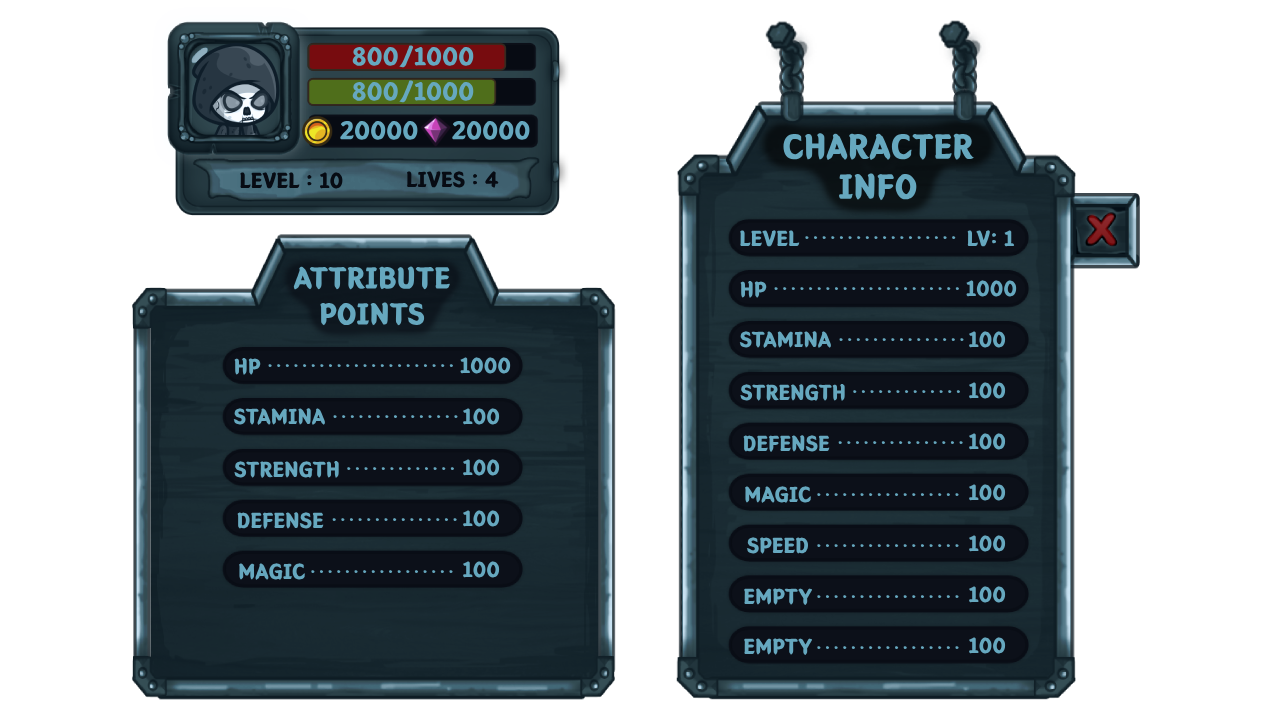
<style>
.page{position:relative;width:1280px;height:720px;background:#ffffff}
.page>*{position:absolute;margin:0}
.t1{font:25px "BMEULJIROTTF";color:#66a8bf;text-transform:uppercase;font-weight:bold}
.t2{font:33.9px "BMEULJIROTTF";color:#66a8bf;text-transform:uppercase;font-weight:bold}
.t3{font:21.2px "BMEULJIROTTF";color:#070b13;text-transform:uppercase;font-weight:bold}
.t4{font:21.2px "BMEULJIROTTF";color:#66a8bf;text-transform:uppercase;font-weight:bold}
.t5{font:17px "BMEULJIROTTF";letter-spacing:0.25em;color:#66a8bf;text-transform:uppercase;font-weight:bold}
.t6{font:29.5px "BMEULJIROTTF";color:#66a8bf;text-transform:uppercase;font-weight:bold}
</style>
<div class="page">
<p class="t1" style="left:352px;top:45px;width:122px;height:23px">800/1000</p>
<p class="t1" style="left:352px;top:80px;width:122px;height:23px">800/1000</p>
<p class="t1" style="left:340px;top:121px;width:78px;height:19px">20000</p>
<p class="t1" style="left:452px;top:121px;width:78px;height:19px">20000</p>
<p class="t2" style="left:783px;top:133px;width:191px;height:68px;text-align:center">character<br>Info</p>
<p class="t3" style="left:240px;top:172px;width:103px;height:17px">Level : 10</p>
<p class="t3" style="left:407px;top:171px;width:92px;height:17px">Lives : 4</p>
<p class="t4" style="left:740px;top:230px;width:60px;height:17px">Level</p>
<p class="t4" style="left:967px;top:230px;width:48px;height:17px">Lv: 1</p>
<p class="t5" style="left:805px;top:236px;width:151px;height:3px">..................</p>
<p class="t6" style="left:293px;top:266px;width:157px;height:60px;text-align:center">Attribute<br>Points</p>
<p class="t4" style="left:740px;top:281px;width:27px;height:17px">HP</p>
<p class="t4" style="left:966px;top:280px;width:51px;height:17px">1000</p>
<p class="t5" style="left:774px;top:287px;width:185px;height:3px">......................</p>
<p class="t4" style="left:739px;top:331px;width:92px;height:17px">Stamina</p>
<p class="t5" style="left:839px;top:338px;width:125px;height:3px">...............</p>
<p class="t4" style="left:969px;top:331px;width:37px;height:17px">100</p>
<p class="t4" style="left:234px;top:358px;width:27px;height:17px">HP</p>
<p class="t5" style="left:268px;top:364px;width:185px;height:3px">......................</p>
<p class="t4" style="left:460px;top:357px;width:51px;height:17px">1000</p>
<p class="t4" style="left:740px;top:384px;width:105px;height:17px">Strength</p>
<p class="t5" style="left:853px;top:390px;width:107px;height:3px">.............</p>
<p class="t4" style="left:969px;top:382px;width:37px;height:17px">100</p>
<p class="t4" style="left:233px;top:408px;width:92px;height:17px">Stamina</p>
<p class="t4" style="left:463px;top:408px;width:37px;height:17px">100</p>
<p class="t5" style="left:333px;top:415px;width:125px;height:3px">...............</p>
<p class="t4" style="left:743px;top:435px;width:87px;height:17px">Defense</p>
<p class="t4" style="left:969px;top:433px;width:37px;height:17px">100</p>
<p class="t5" style="left:838px;top:441px;width:125px;height:3px">...............</p>
<p class="t4" style="left:234px;top:461px;width:105px;height:17px">Strength</p>
<p class="t4" style="left:463px;top:459px;width:37px;height:17px">100</p>
<p class="t5" style="left:347px;top:467px;width:107px;height:3px">.............</p>
<p class="t4" style="left:745px;top:486px;width:67px;height:17px">Magic</p>
<p class="t4" style="left:969px;top:484px;width:37px;height:17px">100</p>
<p class="t5" style="left:817px;top:493px;width:142px;height:3px">.................</p>
<p class="t4" style="left:463px;top:510px;width:37px;height:17px">100</p>
<p class="t4" style="left:237px;top:512px;width:87px;height:17px">Defense</p>
<p class="t5" style="left:332px;top:518px;width:125px;height:3px">...............</p>
<p class="t4" style="left:746px;top:537px;width:62px;height:17px">Speed</p>
<p class="t5" style="left:817px;top:544px;width:142px;height:3px">.................</p>
<p class="t4" style="left:969px;top:535px;width:37px;height:17px">100</p>
<p class="t4" style="left:239px;top:563px;width:67px;height:17px">Magic</p>
<p class="t4" style="left:463px;top:561px;width:37px;height:17px">100</p>
<p class="t5" style="left:311px;top:570px;width:142px;height:3px">.................</p>
<p class="t4" style="left:744px;top:588px;width:68px;height:17px">Empty</p>
<p class="t4" style="left:969px;top:586px;width:37px;height:17px">100</p>
<p class="t5" style="left:817px;top:595px;width:142px;height:3px">.................</p>
<p class="t4" style="left:744px;top:638px;width:68px;height:17px">Empty</p>
<p class="t4" style="left:969px;top:637px;width:37px;height:17px">100</p>
<p class="t5" style="left:817px;top:646px;width:142px;height:3px">.................</p>
</div>
